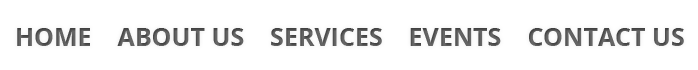
<style>
.page{position:relative;width:698px;height:70px;background:#ffffff}
.page>*{position:absolute;margin:0}
.t1{font:25px "OpenSans-Bold";color:#666666}
</style>
<div class="page">
<p class="t1" style="left:17px;top:28px;width:667px;height:18px">HOME    ABOUT US    SERVICES    EVENTS    CONTACT US</p>
</div>
